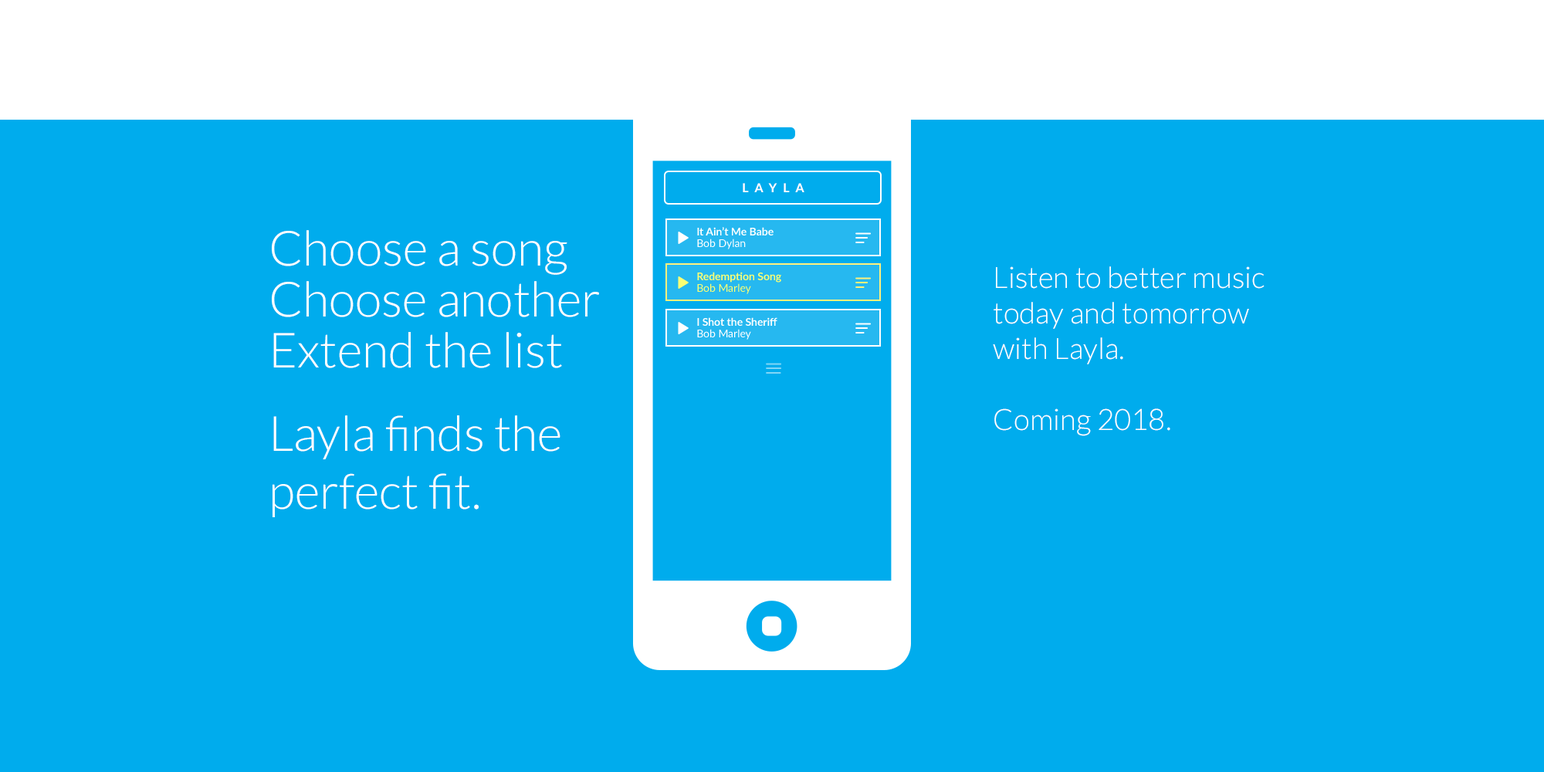
<style>
.page{position:relative;width:1544px;height:772px;background:#00aced}
.page>*{position:absolute;margin:0}
.t1{font:12.4px "Lato-Bold";letter-spacing:0.5em;color:#ffffff}
.t2{font:48.6px "Lato-Light";color:#ffffff}
.t3{font:29.6px "Lato-Light";color:#ffffff}
</style>
<div class="page">
<p class="t1" style="left:743px;top:183px;width:62px;height:9px">LAYLA</p>
<p class="t2" style="left:272px;top:230px;width:296px;height:45px">Choose a song</p>
<p class="t3" style="left:993px;top:266px;width:272px;height:170px">Listen to better music today and tomorrow with Layla.<br><br>Coming 2018.</p>
<p class="t2" style="left:272px;top:281px;width:327px;height:36px">Choose another</p>
<p class="t2" style="left:273px;top:332px;width:289px;height:36px">Extend the list</p>
<p class="t2" style="left:273px;top:415px;width:288px;height:102px">Layla finds the perfect fit.</p>
</div>
